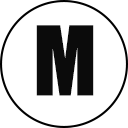
<style>
.page{position:relative;width:128px;height:128px;background:#ffffff}
.page>*{position:absolute;margin:0}
.t1{font:88.9px "Impact";color:#0b0b0b}
</style>
<div class="page">
<p class="t1" style="left:36px;top:25px;width:58px;height:71px">M</p>
</div>
